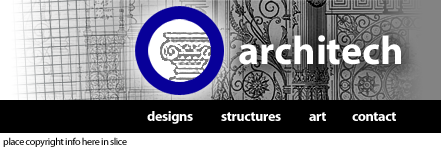
<style>
.page{position:relative;width:441px;height:150px;background:#000000}
.page>*{position:absolute;margin:0}
.t1{font:40px "Myriad-Bold";color:#ffffff}
.t2{font:14px "Myriad-Bold";letter-spacing:-0.025em;color:#ffffff}
.t3{font:10px "Myriad-Roman";letter-spacing:-0.025em;color:#000000}
</style>
<div class="page">
<p class="t1" style="left:239px;top:35px;width:162px;height:30px">architech</p>
<p class="t2" style="left:147px;top:111px;width:46px;height:13px">designs</p>
<p class="t2" style="left:221px;top:112px;width:60px;height:9px">structures</p>
<p class="t2" style="left:309px;top:112px;width:17px;height:9px">art</p>
<p class="t2" style="left:352px;top:112px;width:44px;height:9px">contact</p>
<p class="t3" style="left:3px;top:137px;width:124px;height:10px">place copyright info here in slice</p>
</div>
